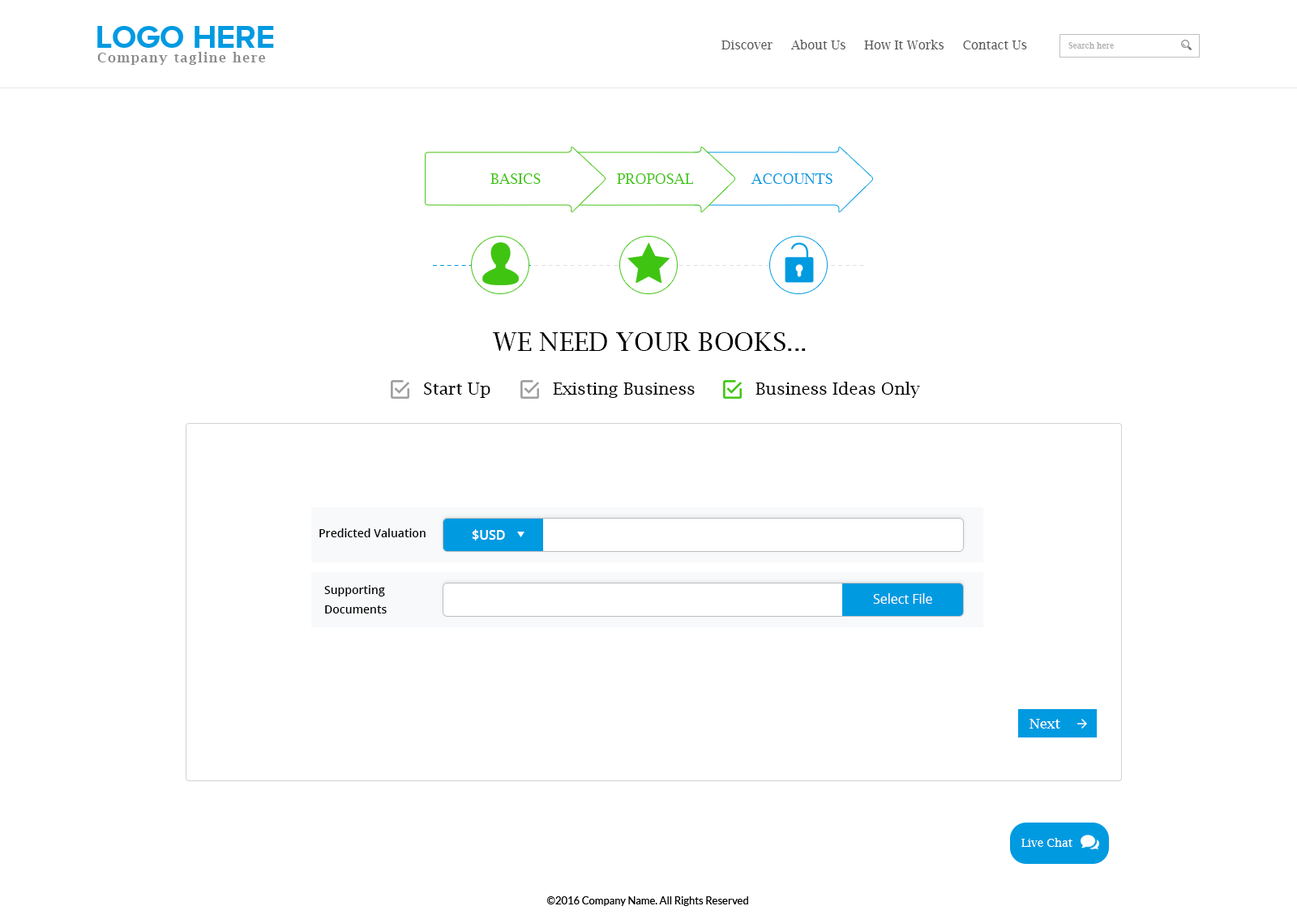
<style>
.page{position:relative;width:1297px;height:919px;background:#ffffff}
.page>*{position:absolute;margin:0}
.t1{font:32.4px "ProximaNovaA-Bold";color:#009ae1;text-transform:uppercase}
.t2{font:12.2px "LucidaBright";color:#585858}
.t3{font:13px "LucidaBright-Demi";letter-spacing:0.1em;color:#898989}
.t4{font:8.1px "LucidaBright";color:#afafaf}
.t5{font:14.6px "LucidaBright";color:#40c412}
.t6{font:14.6px "LucidaBright";color:#009ae1;text-transform:uppercase}
.t7{font:17px "LucidaBright";letter-spacing:0.1em;color:#e1e1e1}
.t8{font:17px "LucidaBright";letter-spacing:0.1em;color:#009ae1}
.t9{font:25.9px "LucidaBright";color:#000000;text-transform:uppercase}
.t10{font:17px "LucidaBright";color:#000000}
.t11{font:11.3px "OpenSans-Semibold";color:#000000}
.t12{font:13px "OpenSans-Semibold";color:#ffffff}
.t13{font:11.3px/19.5px "OpenSans-Semibold";color:#000000}
.t14{font:13px "OpenSans";color:#ffffff}
.t15{font:13.8px "LucidaBright";color:#ffffff}
.t16{font:11.3px "LucidaBright";color:#ffffff}
.t17{font:10.5px "Lato-Regular";color:#000000}
</style>
<div class="page">
<p class="t1" style="left:97px;top:26px;width:177px;height:22px">Logo HERE</p>
<p class="t2" style="left:722px;top:40px;width:305px;height:9px">Discover     About Us     How It Works     Contact Us</p>
<p class="t3" style="left:97px;top:52px;width:168px;height:13px">Company tagline here</p>
<p class="t4" style="left:1068px;top:42px;width:46px;height:7px">Search here</p>
<p class="t5" style="left:490px;top:173px;width:51px;height:11px">BASICS</p>
<p class="t5" style="left:617px;top:173px;width:76px;height:11px">PROPOSAL</p>
<p class="t6" style="left:751px;top:173px;width:82px;height:11px">Accounts</p>
<p class="t7" style="left:432px;top:265px;width:432px;height:1px"><span class="t8">--------------</span>----------------------------------------------</p>
<p class="t9" style="left:493px;top:332px;width:313px;height:19px">we need your books...</p>
<p class="t10" style="left:424px;top:383px;width:66px;height:15px">Start Up</p>
<p class="t10" style="left:553px;top:383px;width:142px;height:15px">Existing Business</p>
<p class="t10" style="left:756px;top:382px;width:164px;height:16px">Business Ideas Only</p>
<p class="t11" style="left:319px;top:529px;width:107px;height:8px">Predicted Valuation</p>
<p class="t12" style="left:472px;top:529px;width:33px;height:12px">$USD</p>
<p class="t13" style="left:324px;top:585px;width:63px;height:29px">Supporting <br>Documents</p>
<p class="t14" style="left:873px;top:593px;width:59px;height:11px">Select File</p>
<p class="t15" style="left:1030px;top:719px;width:30px;height:10px">Next</p>
<p class="t16" style="left:1021px;top:838px;width:52px;height:9px">Live Chat</p>
<p class="t17" style="left:546px;top:897px;width:202px;height:9px">©2016 Company Name. All Rights Reserved</p>
</div>
